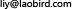
<style>
.page{position:relative;width:72px;height:9px;background:#ffffff}
.page>*{position:absolute;margin:0}
.t1{font:10px "MicrosoftTaiLe";color:#000000}
</style>
<div class="page">
<p class="t1" style="left:0px;top:0px;width:72px;height:9px">liy@laobird.com</p>
</div>
